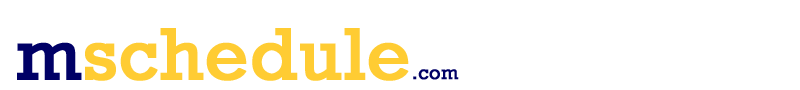
<style>
.page{position:relative;width:800px;height:90px;background:#ffffff}
.page>*{position:absolute;margin:0}
.t1{font:75px "Rockwell";color:#ffcc33;font-weight:bold}
.t2{font:75px "Rockwell";color:#000066;font-weight:bold}
.t3{font:20px "Rockwell";color:#000066;font-weight:bold}
</style>
<div class="page">
<p class="t1" style="left:17px;top:28px;width:442px;height:53px"><span class="t2">m</span>schedule<span class="t3">.com</span></p>
</div>
